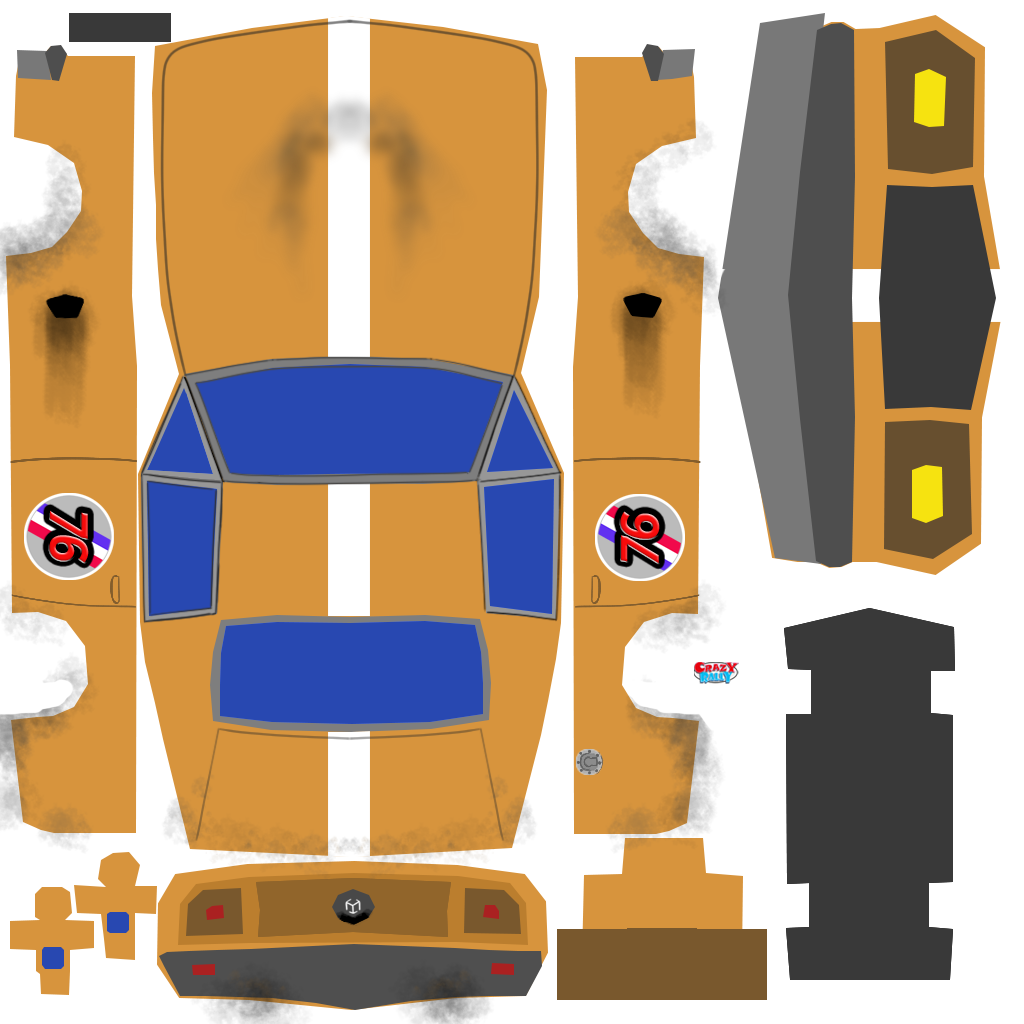
<style>
.page{position:relative;width:1024px;height:1024px;background:#d7943d}
.page>*{position:absolute;margin:0}
.t1{font:54.6px "72-BoldItalic";letter-spacing:-0.07em;color:#f70b0b;scale:0.97 1}
.t2{font:54.6px "72-BoldItalic";letter-spacing:-0.07em;scale:0.97 1}
</style>
<div class="page">
<p class="t1" style="left:49px;top:510px;width:40px;height:53px;rotate:90deg">76</p>
<p class="t2" style="left:620px;top:511px;width:40px;height:53px;rotate:-90deg">76</p>
</div>
